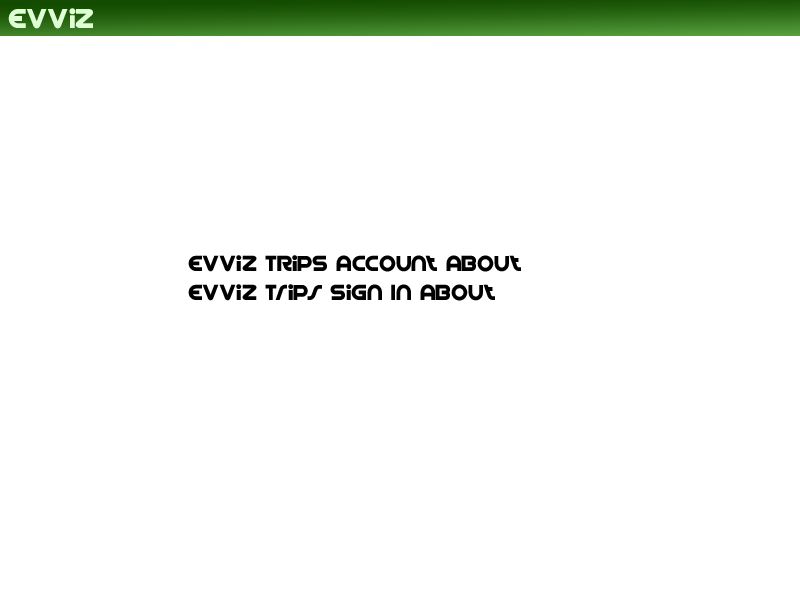
<style>
.page{position:relative;width:800px;height:600px;background:#ffffff}
.page>*{position:absolute;margin:0}
.t1{font:30px "SpinCycleOT";color:#e0ffd5}
.t2{font:24px "SpinCycleOT";color:#000000}
</style>
<div class="page">
<p class="t1" style="left:8px;top:8px;width:85px;height:21px">EVViz</p>
<p class="t2" style="left:188px;top:255px;width:333px;height:46px">EVViz TRipS Account About<br>EVViz Trips Sign In About</p>
</div>
